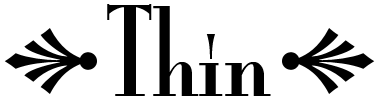
<style>
.page{position:relative;width:380px;height:100px;background:#ffffff}
.page>*{position:absolute;margin:0}
.t1{font:114.6px "MonaLisaSolidITCTT";color:#000000}
</style>
<div class="page">
<p class="t1" style="left:107px;top:4px;width:164px;height:92px">Thin</p>
</div>
